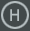
<style>
.page{position:relative;width:30px;height:31px;background:#42494a}
.page>*{position:absolute;margin:0}
.t1{font:16.1px "Verdana";letter-spacing:0.04em;color:#b5bec0;scale:0.93 1}
</style>
<div class="page">
<p class="t1" style="left:10px;top:9px;width:9px;height:12px">H</p>
</div>
